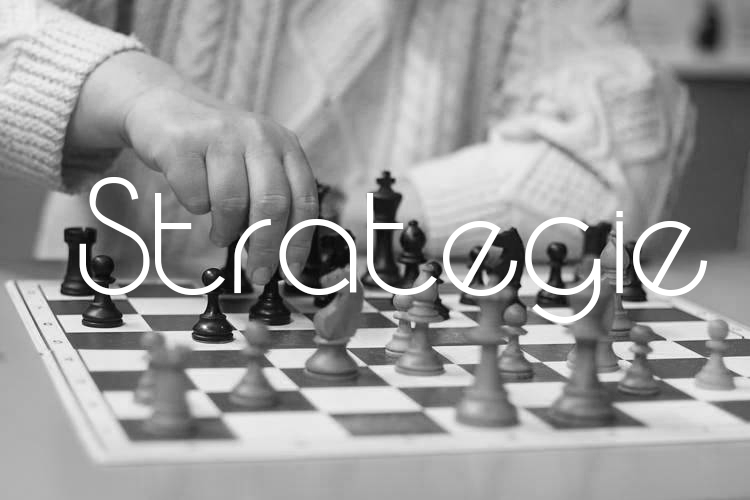
<style>
.page{position:relative;width:750px;height:500px}
.page>*{position:absolute;margin:0}
.t1{font:160px "Moonbeam";color:#ffffff}
</style>
<div class="page">
<p class="t1" style="left:79px;top:177px;width:629px;height:146px">Strategie</p>
</div>
